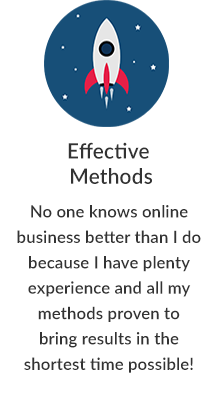
<style>
.page{position:relative;width:216px;height:398px;background:#ffffff}
.page>*{position:absolute;margin:0}
.t1{font:16.9px/25.4px "Lato-Semibold";letter-spacing:0.01em;color:#333333}
.t2{font:21.2px "Lato-Semibold";letter-spacing:0.01em;color:#333333}
.t3{font:16.9px/33.8px "Lato-Semibold";letter-spacing:0.01em;color:#333333}
</style>
<div class="page">
<p class="t1" style="left:17px;top:142px;width:184px;height:231px;text-align:center"><span class="t2">Effective <br>Methods<br></span><span class="t3">No one knows online</span> <br>business better than I do <br>because I have plenty <br>experience and all my <br>methods proven to <br>bring results in the <br>shortest time possible!</p>
</div>
